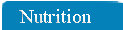
<style>
.page{position:relative;width:123px;height:30px;background:#0481b8}
.page>*{position:absolute;margin:0}
.t1{font:20px "TimesNewRomanPSMT";color:#fafafa}
</style>
<div class="page">
<p class="t1" style="left:19px;top:9px;width:72px;height:14px">Nutrition</p>
</div>
